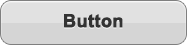
<style>
.page{position:relative;width:187px;height:45px;background:#d5d5d5}
.page>*{position:absolute;margin:0}
.t1{font:18px "Arial-BoldMT";color:#333333;font-weight:bold}
</style>
<div class="page">
<p class="t1" style="left:64px;top:14px;width:59px;height:14px">Button</p>
</div>
